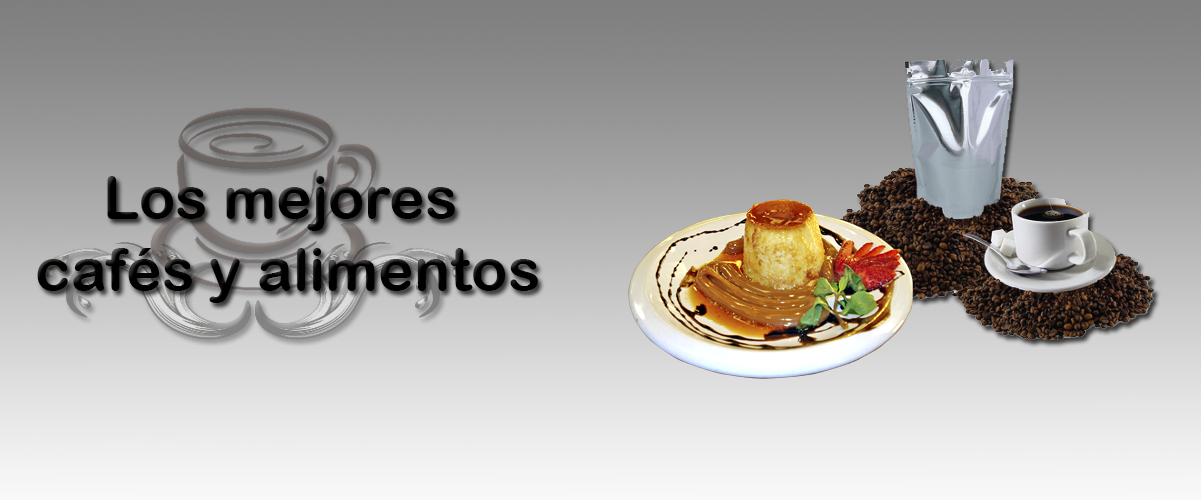
<style>
.page{position:relative;width:1201px;height:500px}
.page>*{position:absolute;margin:0}
.t1{font:60px "ArialRoundedMTBold";color:#000000}
</style>
<div class="page">
<p class="t1" style="left:37px;top:176px;width:501px;height:127px;text-align:center">Los mejores <br>cafés y alimentos</p>
</div>
